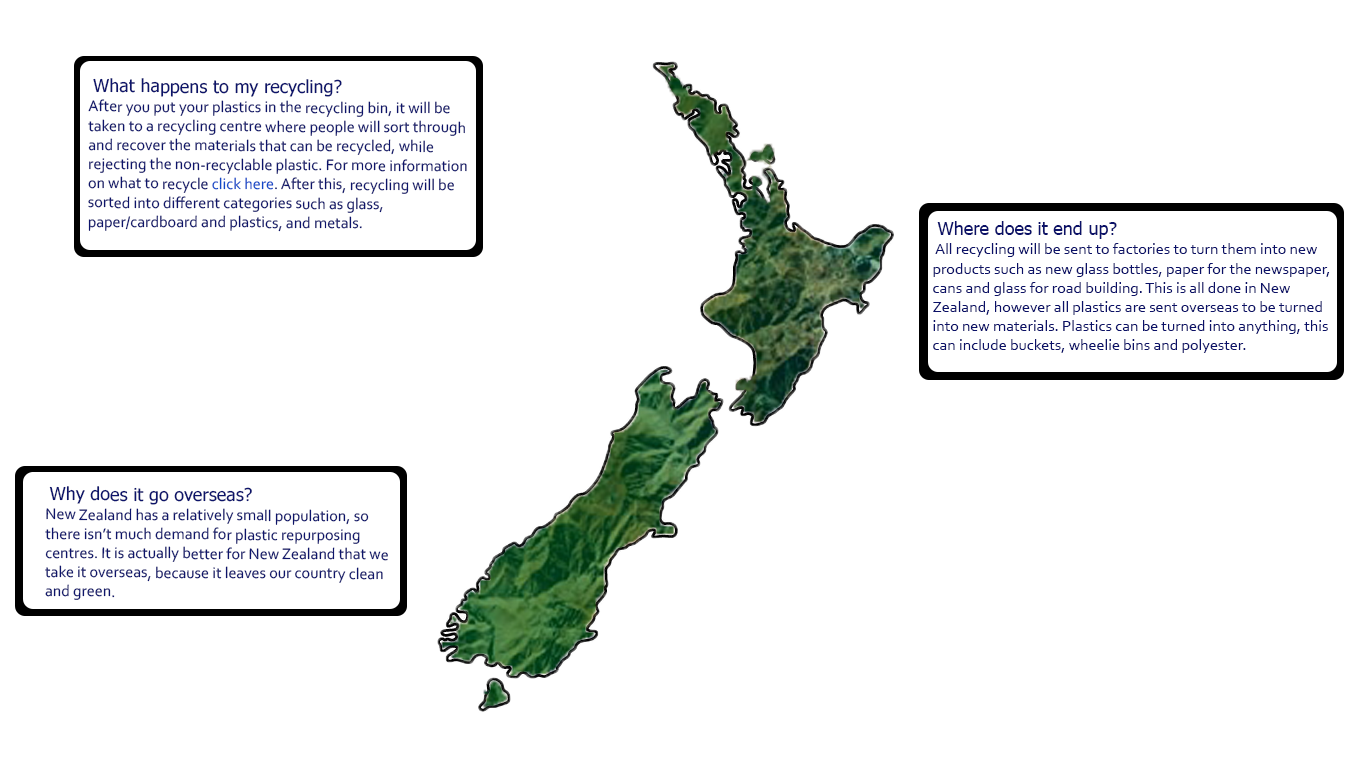
<style>
.page{position:relative;width:1366px;height:768px;background:#ffffff}
.page>*{position:absolute;margin:0}
.t1{font:16px "Corbel";color:#0d146b}
.t2{font:18px "Tahoma";color:#0d146b}
.t3{font:16px "Corbel";color:#1149c8}
.t4{font:16px "Corbel";color:#0b1168}
.t5{font:18px "Tahoma";color:#0b1168}
</style>
<div class="page">
<p class="t1" style="left:88px;top:78px;width:379px;height:154px"><span class="t2">What happens to my recycling?</span><br>After you put your plastics in the recycling bin, it will be taken to a recycling centre where people will sort through and recover the materials that can be recycled, while rejecting the non-recyclable plastic. For more information on what to recycle <span class="t3">click here</span>. After this, recycling will be sorted into different categories such as glass, paper/cardboard and plastics, and metals.</p>
<p class="t4" style="left:933px;top:221px;width:397px;height:132px"><span class="t5">Where does it end up?<br></span> All recycling will be sent to factories to turn them into new products such as new glass bottles, paper for the newspaper, cans and glass for road building. This is all done in New Zealand, however all plastics are sent overseas to be turned into new materials. Plastics can be turned into anything, this can include buckets, wheelie bins and polyester.</p>
<p class="t1" style="left:45px;top:486px;width:343px;height:114px"><span class="t2">Why does it go overseas?<br></span>New Zealand has a relatively small population, so there isn’t much demand for plastic repurposing centres. It is actually better for New Zealand that we take it overseas, because it leaves our country clean and green.</p>
</div>
